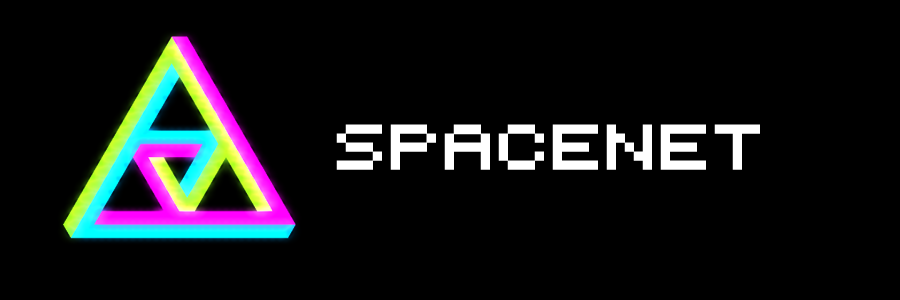
<style>
.page{position:relative;width:900px;height:300px;background:#000000}
.page>*{position:absolute;margin:0}
.t1{font:72px "Uni0553";color:#ffffff}
</style>
<div class="page">
<p class="t1" style="left:336px;top:124px;width:424px;height:46px">SPACENET</p>
</div>
